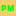
<style>
.page{position:relative;width:16px;height:16px;background:#f0d16c}
.page>*{position:absolute;margin:0}
.t1{font:7px "Boomer-Black";color:#00ff00}
</style>
<div class="page">
<p class="t1" style="left:1px;top:5px;width:13px;height:6px">PM</p>
</div>
